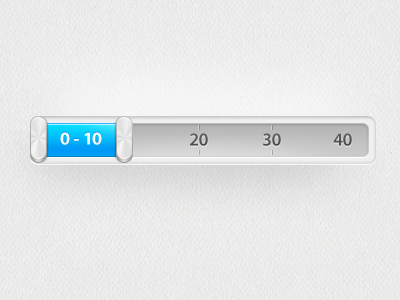
<style>
.page{position:relative;width:400px;height:300px}
.page>*{position:absolute;margin:0}
.t1{font:18px "MyriadPro-Bold";color:#ffffff}
.t2{font:18px "MyriadPro-Semibold";color:#505050}
</style>
<div class="page">
<p class="t1" style="left:60px;top:132px;width:42px;height:13px">0 - 10</p>
<p class="t2" style="left:190px;top:133px;width:18px;height:13px">20</p>
<p class="t2" style="left:263px;top:133px;width:18px;height:13px">30</p>
<p class="t2" style="left:333px;top:133px;width:19px;height:13px">40</p>
</div>
